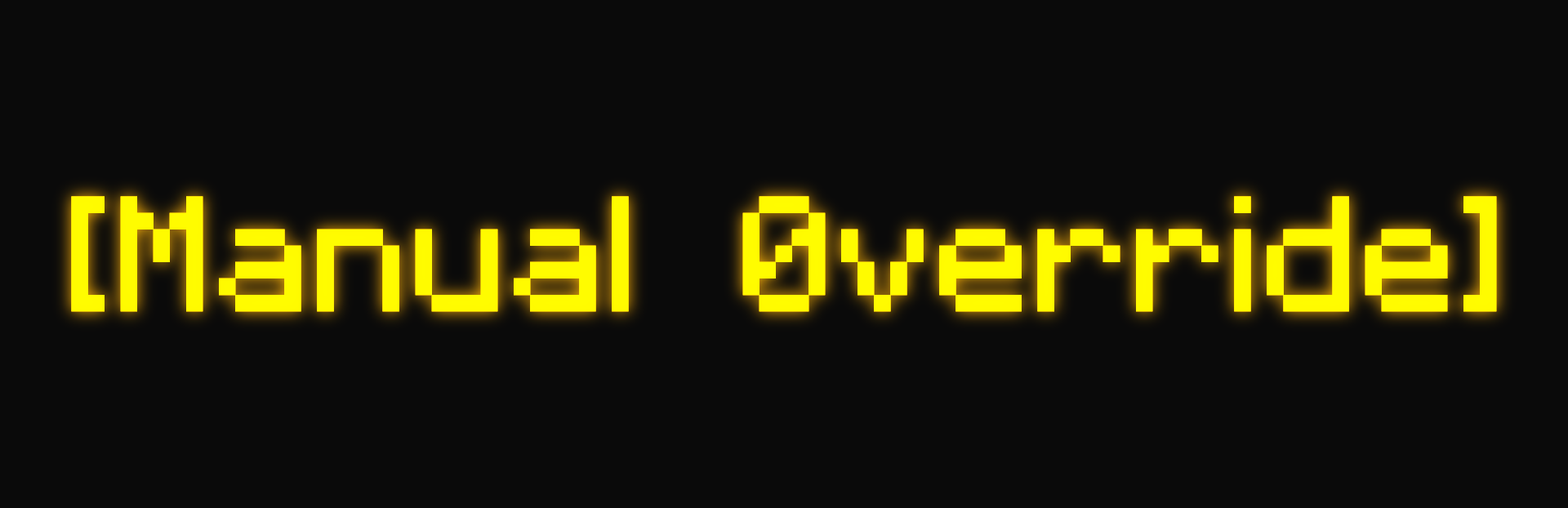
<style>
.page{position:relative;width:1568px;height:508px;background:#0a0a0a}
.page>*{position:absolute;margin:0}
.t1{font:131px "RosesareFF0000";color:#fffb00}
</style>
<div class="page">
<p class="t1" style="left:71px;top:196px;width:1426px;height:116px">[Manual 0verride]</p>
<p class="t1" style="left:71px;top:196px;width:1426px;height:116px">[Manual 0verride]</p>
<p class="t1" style="left:71px;top:196px;width:1426px;height:116px">[Manual 0verride]</p>
</div>
